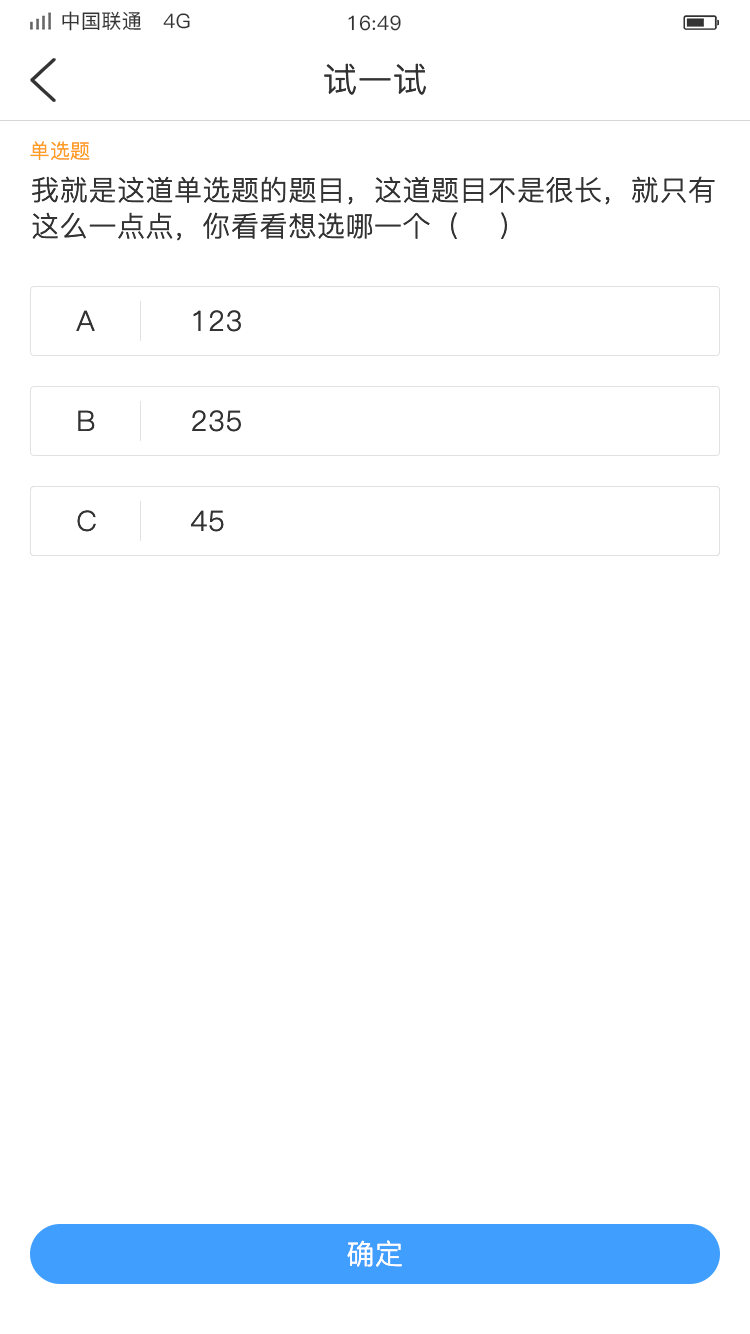
<style>
.page{position:relative;width:750px;height:1334px;background:#ffffff}
.page>*{position:absolute;margin:0}
.t1{font:20px "PingFang-SC-Medium";letter-spacing:0.02em;color:#333333}
.t2{font:34px "PingFang-SC-Regular";letter-spacing:0.02em;color:#333333}
.t3{font:20px "PingFang-SC-Regular";letter-spacing:0.02em;color:#ff9e21}
.t4{font:28px/36px "PingFang-SC-Regular";letter-spacing:0.02em;color:#333333}
.t5{font:28px "PingFang-SC-Regular";letter-spacing:0.02em;color:#333333}
.t6{font:28px "PingFang-SC-Regular";letter-spacing:0.02em;color:#ffffff}
</style>
<div class="page">
<p class="t1" style="left:62px;top:11px;width:128px;height:20px">中国联通   4G</p>
<p class="t1" style="left:348px;top:15px;width:53px;height:16px">16:49</p>
<p class="t2" style="left:324px;top:63px;width:102px;height:32px">试一试</p>
<p class="t3" style="left:30px;top:141px;width:60px;height:19px">单选题</p>
<p class="t4" style="left:32px;top:176px;width:683px;height:65px">我就是这道单选题的题目，这道题目不是很长，就只有这么一点点，你看看想选哪一个（    ）</p>
<p class="t5" style="left:76px;top:310px;width:19px;height:21px">A</p>
<p class="t5" style="left:193px;top:310px;width:48px;height:22px">123</p>
<p class="t5" style="left:78px;top:410px;width:17px;height:21px">B</p>
<p class="t5" style="left:192px;top:410px;width:49px;height:22px">235</p>
<p class="t5" style="left:77px;top:510px;width:19px;height:22px">C</p>
<p class="t5" style="left:77px;top:510px;width:19px;height:22px">C</p>
<p class="t5" style="left:191px;top:510px;width:33px;height:22px">45</p>
<p class="t5" style="left:191px;top:510px;width:33px;height:22px">45</p>
<p class="t6" style="left:347px;top:1240px;width:55px;height:27px">确定</p>
</div>
